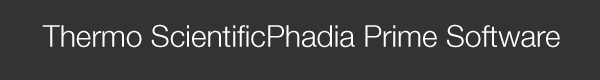
<style>
.page{position:relative;width:600px;height:80px;background:#333333}
.page>*{position:absolute;margin:0}
.t1{font:30px "HelveticaNeueLTStd-Lt";color:#ffffff}
</style>
<div class="page">
<p class="t1" style="left:42px;top:24px;width:518px;height:24px">Thermo ScientificPhadia Prime Software</p>
</div>
